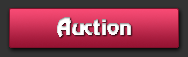
<style>
.page{position:relative;width:188px;height:57px;background:#333333}
.page>*{position:absolute;margin:0}
.t1{font:20px "Revue"}
</style>
<div class="page">
<p class="t1" style="left:57px;top:17px;width:74px;height:20px">Auction</p>
</div>
